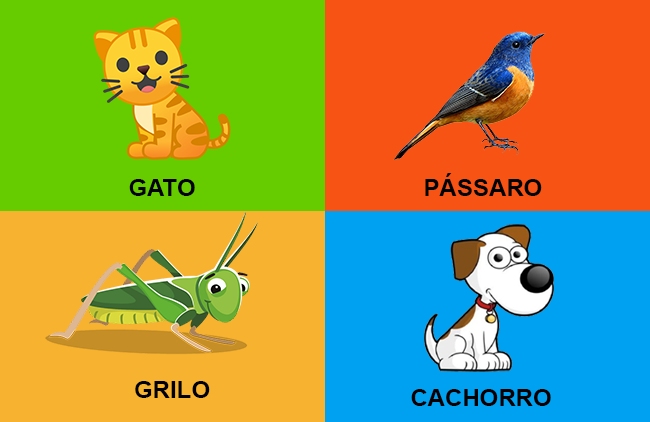
<style>
.page{position:relative;width:650px;height:422px;background:#f65314}
.page>*{position:absolute;margin:0}
.t1{font:24px "Arial-BoldMT";color:#000000}
</style>
<div class="page">
<p class="t1" style="left:425px;top:173px;width:117px;height:23px">PÁSSARO</p>
<p class="t1" style="left:129px;top:179px;width:66px;height:17px">GATO</p>
<p class="t1" style="left:135px;top:381px;width:75px;height:17px">GRILO</p>
<p class="t1" style="left:411px;top:389px;width:140px;height:17px">CACHORRO</p>
</div>
